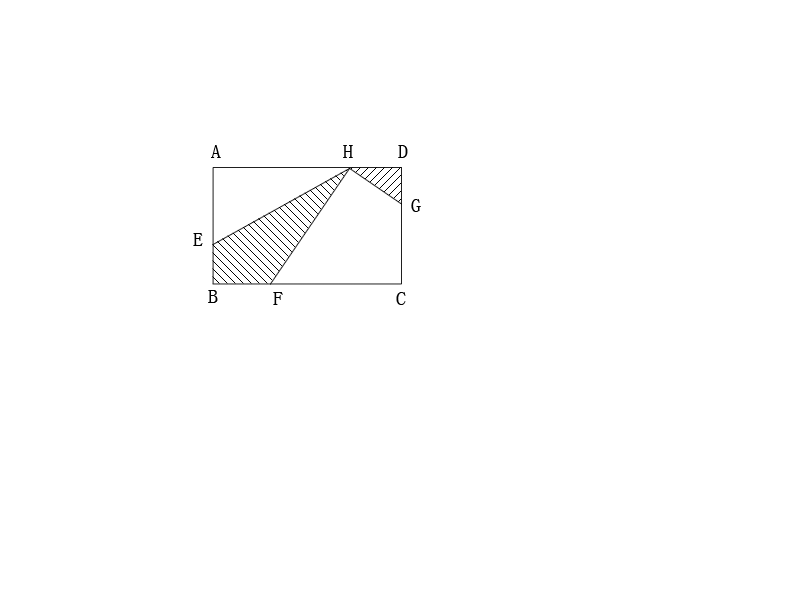
<style>
.page{position:relative;width:800px;height:600px;background:#ffffff}
.page>*{position:absolute;margin:0}
.t1{font:20px "SimSun";color:#000000}
</style>
<div class="page">
<p class="t1" style="left:211px;top:145px;width:10px;height:13px">A</p>
<p class="t1" style="left:343px;top:145px;width:10px;height:13px">H</p>
<p class="t1" style="left:398px;top:145px;width:10px;height:13px">D</p>
<p class="t1" style="left:411px;top:199px;width:10px;height:13px">G</p>
<p class="t1" style="left:193px;top:233px;width:10px;height:13px">E</p>
<p class="t1" style="left:208px;top:290px;width:10px;height:13px">B</p>
<p class="t1" style="left:273px;top:292px;width:10px;height:13px">F</p>
<p class="t1" style="left:396px;top:292px;width:10px;height:13px">C</p>
</div>
